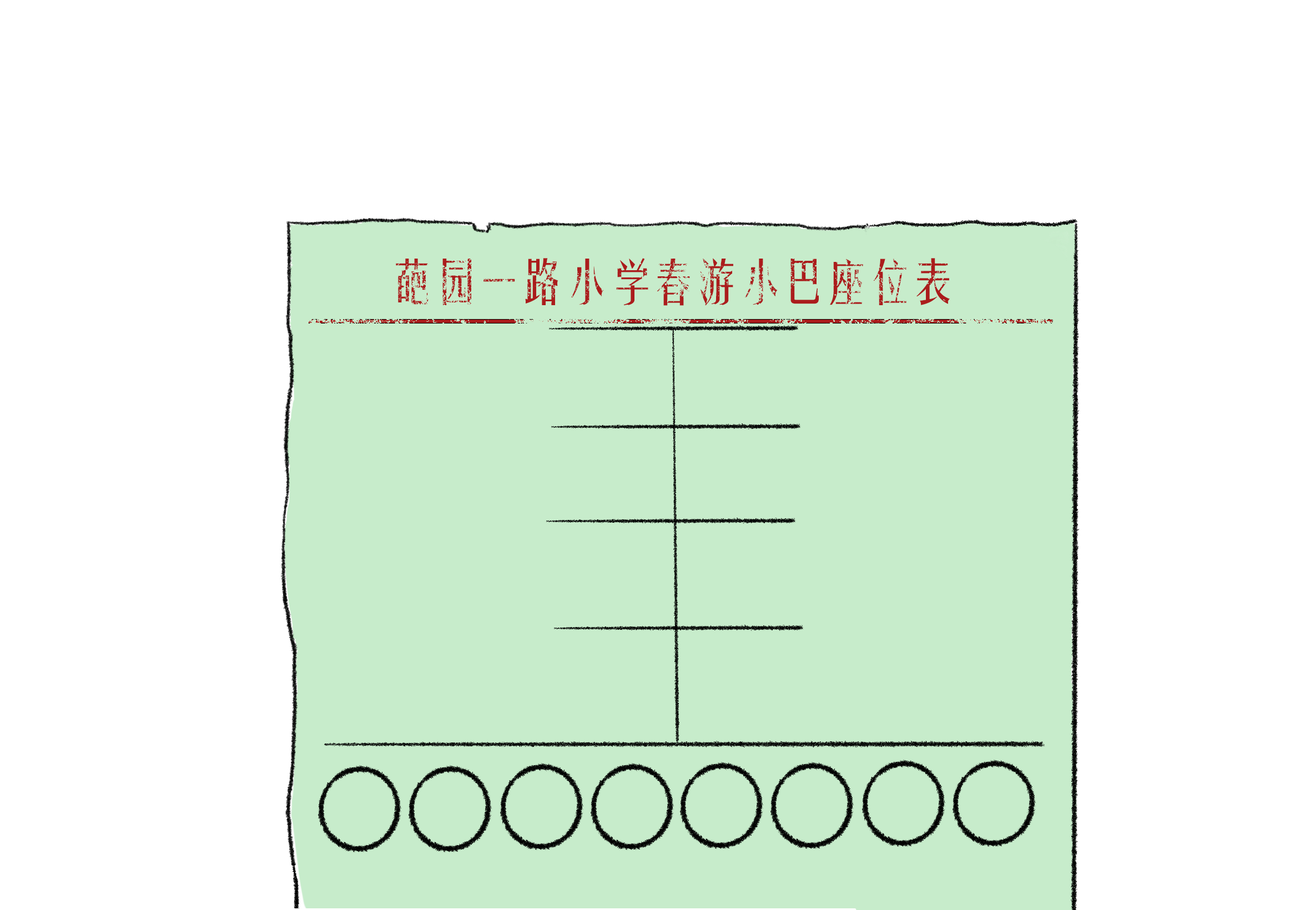
<style>
.page{position:relative;width:1310px;height:910px;background:#ffffff}
.page>*{position:absolute;margin:0}
.t1{font:48.3px "FZYTK--GBK1-0";letter-spacing:-0.1em;color:#ab1c1c}
</style>
<div class="page">
<p class="t1" style="left:396px;top:258px;width:554px;height:48px">葩园一路小学春游小巴座位表</p>
</div>
